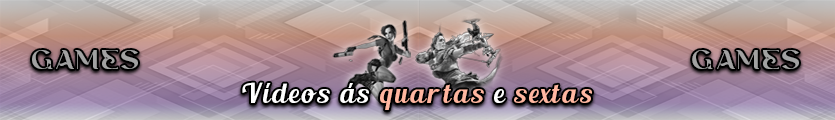
<style>
.page{position:relative;width:835px;height:120px}
.page>*{position:absolute;margin:0}
.t1{font:24.8px "Ankori-Regular";letter-spacing:0.1em;color:#a2a2a2;scale:1.16 1}
.t2{font:26.8px "BlendaScript";letter-spacing:0.1em;color:#ffffff}
.t3{font:26.8px "BlendaScript";letter-spacing:0.1em;color:#ffb6a0}
.t4{font:26.8px "BlendaScript";letter-spacing:0.1em;color:#ffb7a1}
</style>
<div class="page">
<p class="t1" style="left:32px;top:50px;width:106px;height:19px">GAMES</p>
<p class="t1" style="left:692px;top:50px;width:107px;height:19px">GAMES</p>
<p class="t2" style="left:242px;top:82px;width:350px;height:28px">Vídeos ás <span class="t3">quartas</span> e <span class="t4">sextas</span></p>
</div>
